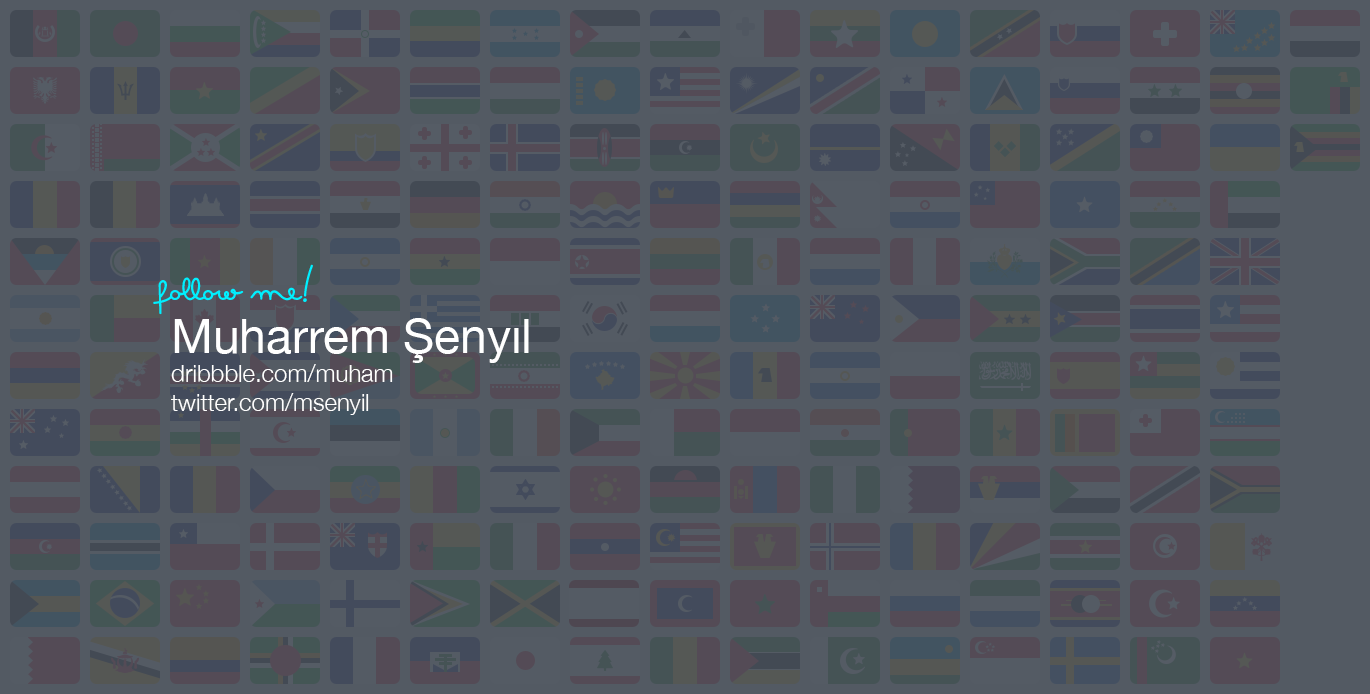
<style>
.page{position:relative;width:1370px;height:694px;background:#535a63}
.page>*{position:absolute;margin:0}
.t1{font:24px/24px "HelveticaNeue-Light";color:#ffffff}
.t2{font:48px "HelveticaNeue";color:#ffffff}
.t3{font:24px "HelveticaNeue-Light";color:#ffffff}
</style>
<div class="page">
<p class="t1" style="left:171px;top:318px;width:358px;height:97px"><span class="t2">Muharrem Şenyıl<br></span><span class="t3">dribbble.com/muha</span>m<br>twitter.com/msenyi<span class="t3">l</span></p>
</div>
